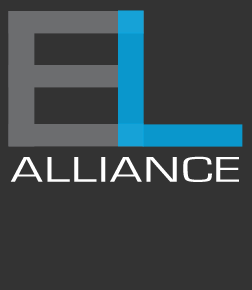
<style>
.page{position:relative;width:252px;height:290px;background:#333333}
.page>*{position:absolute;margin:0}
.t1{font:37px "EurostileRegular";letter-spacing:0.02em;color:#ffffff;scale:1.44 1}
</style>
<div class="page">
<p class="t1" style="left:10px;top:156px;width:229px;height:26px">ALLIANCE</p>
</div>
